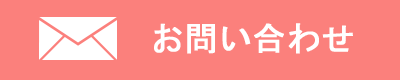
<style>
.page{position:relative;width:400px;height:80px;background:#fb807c}
.page>*{position:absolute;margin:0}
.t1{font:33.3px "MS-Gothic";color:#ffffff;font-weight:bold}
</style>
<div class="page">
<p class="t1" style="left:154px;top:23px;width:199px;height:31px">お問い合わせ</p>
</div>
